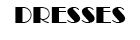
<style>
.page{position:relative;width:140px;height:40px;background:#ffffff}
.page>*{position:absolute;margin:0}
.t1{font:24.1px "Broadway";color:#000000}
</style>
<div class="page">
<p class="t1" style="left:15px;top:7px;width:111px;height:16px">DRESSES</p>
</div>
